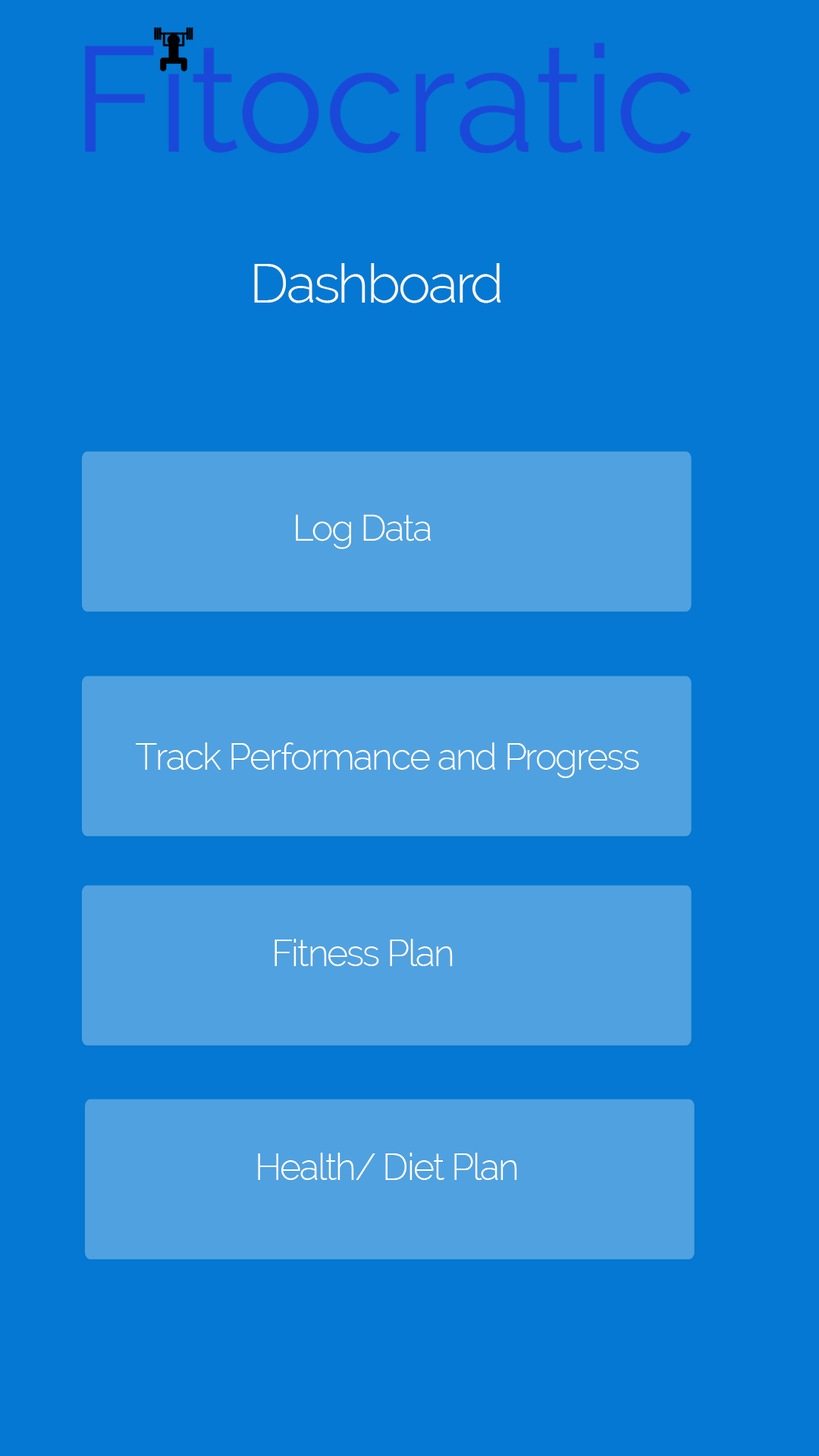
<style>
.page{position:relative;width:819px;height:1456px;background:#0478d2}
.page>*{position:absolute;margin:0}
.t1{font:54.6px "Raleway-Light";letter-spacing:-0.04em;color:#ffffff}
.t2{font:36.4px "Raleway-Light";letter-spacing:-0.04em;color:#ffffff}
</style>
<div class="page">
<p class="t1" style="left:254px;top:263px;width:246px;height:40px">Dashboard</p>
<p class="t2" style="left:296px;top:514px;width:135px;height:35px">Log Data</p>
<p class="t2" style="left:136px;top:742px;width:503px;height:36px">Track Performance and Progress</p>
<p class="t2" style="left:275px;top:939px;width:178px;height:27px">Fitness Plan</p>
<p class="t2" style="left:258px;top:1153px;width:259px;height:27px">Health/ Diet Plan</p>
</div>
